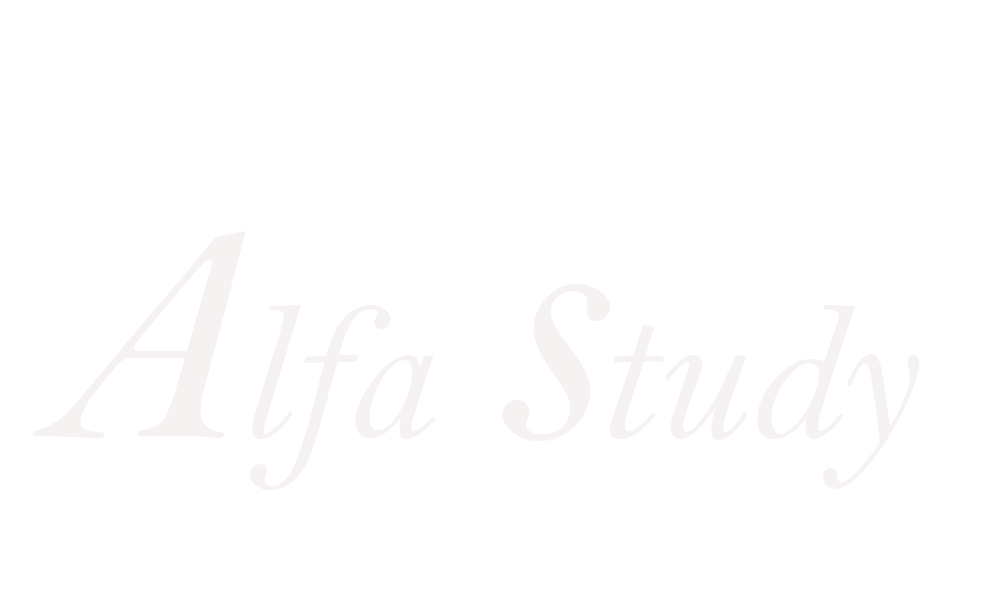
<style>
.page{position:relative;width:1000px;height:600px;background:#ffffff}
.page>*{position:absolute;margin:0}
.t1{font:198px "BellMTItalic";color:#f7f2f2}
.t2{font:317px "BellMTItalic";color:#f7f2f2}
.t3{font:364px "BellMTItalic";color:#f7f2f2}
</style>
<div class="page">
<p class="t1" style="left:32px;top:231px;width:888px;height:259px"><span class="t2">A</span>lfa <span class="t3">s</span>tudy</p>
</div>
